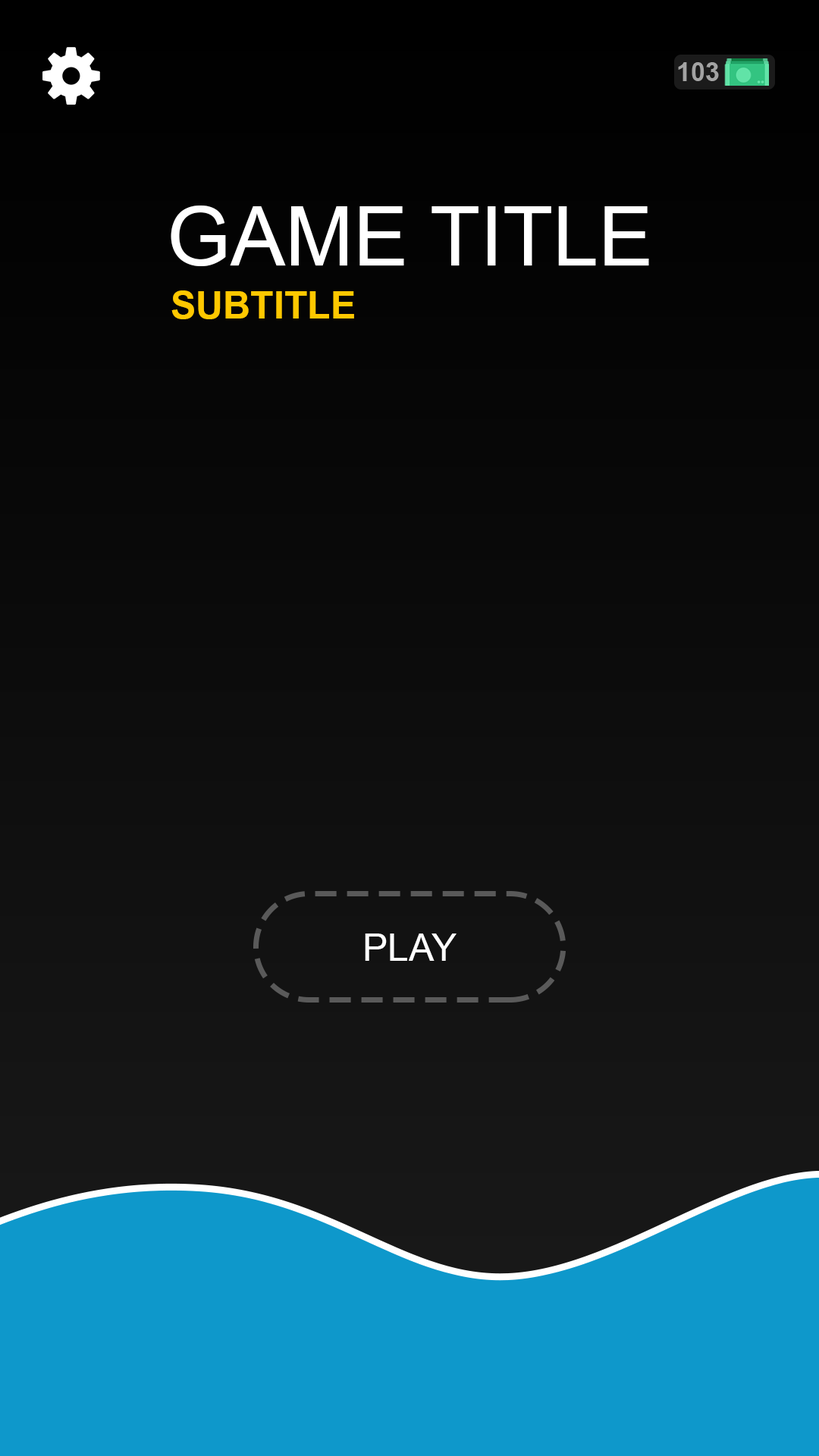
<style>
.page{position:relative;width:819px;height:1456px}
.page>*{position:absolute;margin:0}
.t1{font:82.2px "ArialMT";color:#ffffff}
.t2{font:37.9px "Arial-BoldMT";color:#ffc800}
.t3{font:37.9px "ArialMT";color:#ffffff}
</style>
<div class="page">
<p class="t1" style="left:171px;top:206px;width:478px;height:60px">GAME TITLE</p>
<p class="t2" style="left:171px;top:290px;width:183px;height:29px">SUBTITLE</p>
<p class="t3" style="left:365px;top:933px;width:92px;height:28px">PLAY</p>
</div>
